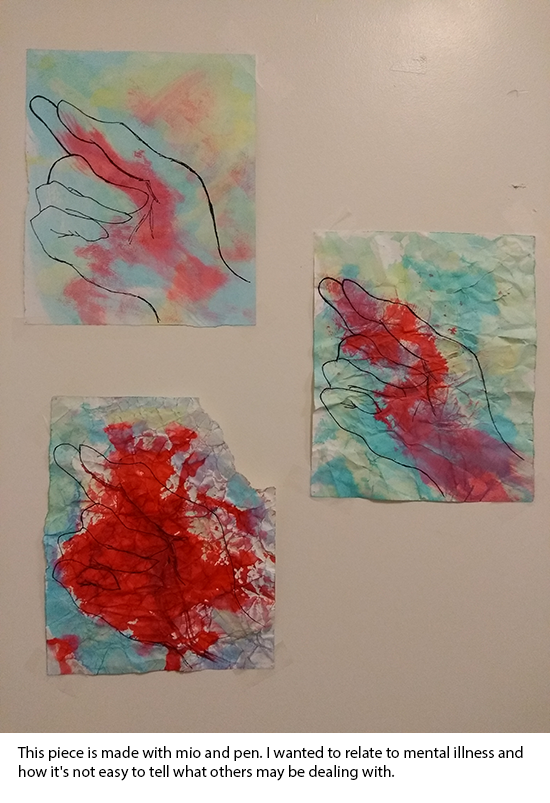
<style>
.page{position:relative;width:550px;height:803px}
.page>*{position:absolute;margin:0}
.t1{font:16px "MyriadPro-Regular";color:#000000}
</style>
<div class="page">
<p class="t1" style="left:17px;top:746px;width:506px;height:35px">This piece is made with mio and pen. I wanted to relate to mental illness and how it's not easy to tell what others may be dealing with.</p>
</div>
